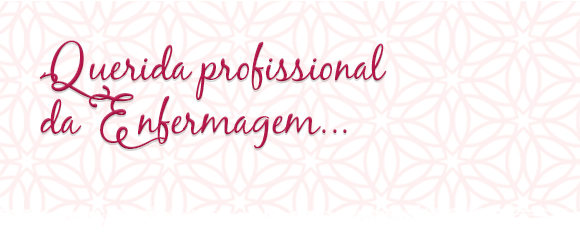
<style>
.page{position:relative;width:580px;height:242px;background:#ffffff}
.page>*{position:absolute;margin:0}
.t1{font:42.8px/31.7px "BlackJack";letter-spacing:-0.01em;color:#b6154a}
.t2{font:42.8px/31.7px "SkallightMillagraRegular";letter-spacing:-0.01em;color:#b6154a}
</style>
<div class="page">
<p class="t1" style="left:39px;top:40px;width:348px;height:109px"><span class="t2">Q</span>uerida profissional<br>da <span class="t2">E</span>nfermagem...</p>
</div>
